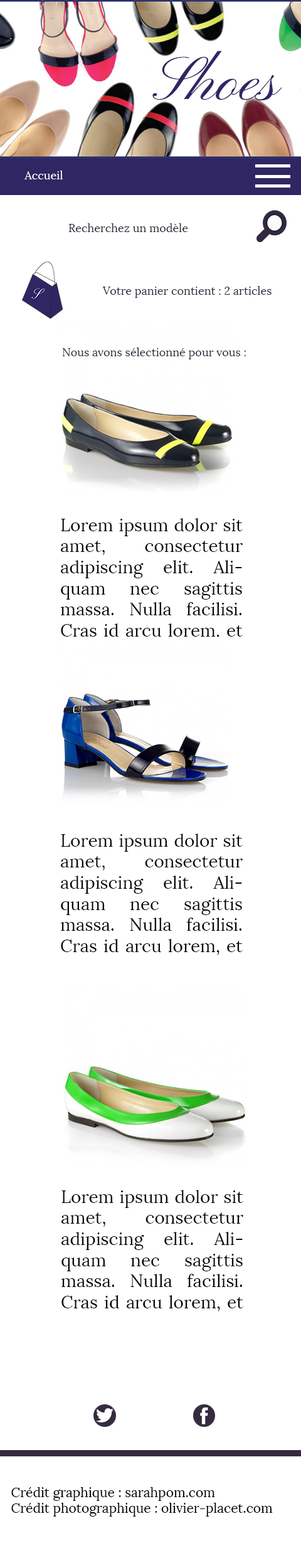
<style>
.page{position:relative;width:301px;height:1568px;background:#ffffff}
.page>*{position:absolute;margin:0}
.t1{font:62.7px "PinyonScript";color:#302663}
.t2{font:11.3px "Lora-Regular";color:#ffffff}
.t3{font:11.3px "Lora-Regular";color:#372b3f}
.t4{font:17.6px "Lora-Regular";color:#070707}
.t5{font:13.2px "Lora-Regular";color:#000000}
</style>
<div class="page">
<p class="t1" style="left:152px;top:51px;width:130px;height:49px">Shoes</p>
<p class="t2" style="left:24px;top:171px;width:39px;height:8px">Accueil</p>
<p class="t3" style="left:68px;top:223px;width:120px;height:9px">Recherchez un modèle</p>
<p class="t3" style="left:102px;top:286px;width:170px;height:12px">Votre panier contient : 2 articles</p>
<p class="t3" style="left:62px;top:347px;width:184px;height:12px">Nous avons sélectionné pour vous :</p>
<p class="t4" style="left:60px;top:518px;width:183px;height:122px;text-align:justify">Lorem ipsum dolor sit amet, consectetur adipiscing elit. Aliquam nec sagittis massa. Nulla facilisi. Cras id arcu lorem, et semper purus.</p>
<p class="t4" style="left:60px;top:834px;width:183px;height:121px;text-align:justify">Lorem ipsum dolor sit amet, consectetur adipiscing elit. Aliquam nec sagittis massa. Nulla facilisi. Cras id arcu lorem, et semper purus.</p>
<p class="t4" style="left:61px;top:1190px;width:182px;height:121px;text-align:justify">Lorem ipsum dolor sit amet, consectetur adipiscing elit. Aliquam nec sagittis massa. Nulla facilisi. Cras id arcu lorem, et semper purus.</p>
<p class="t5" style="left:11px;top:1487px;width:262px;height:30px">Crédit graphique : sarahpom.com <br>Crédit photographique : olivier-placet.com</p>
</div>
